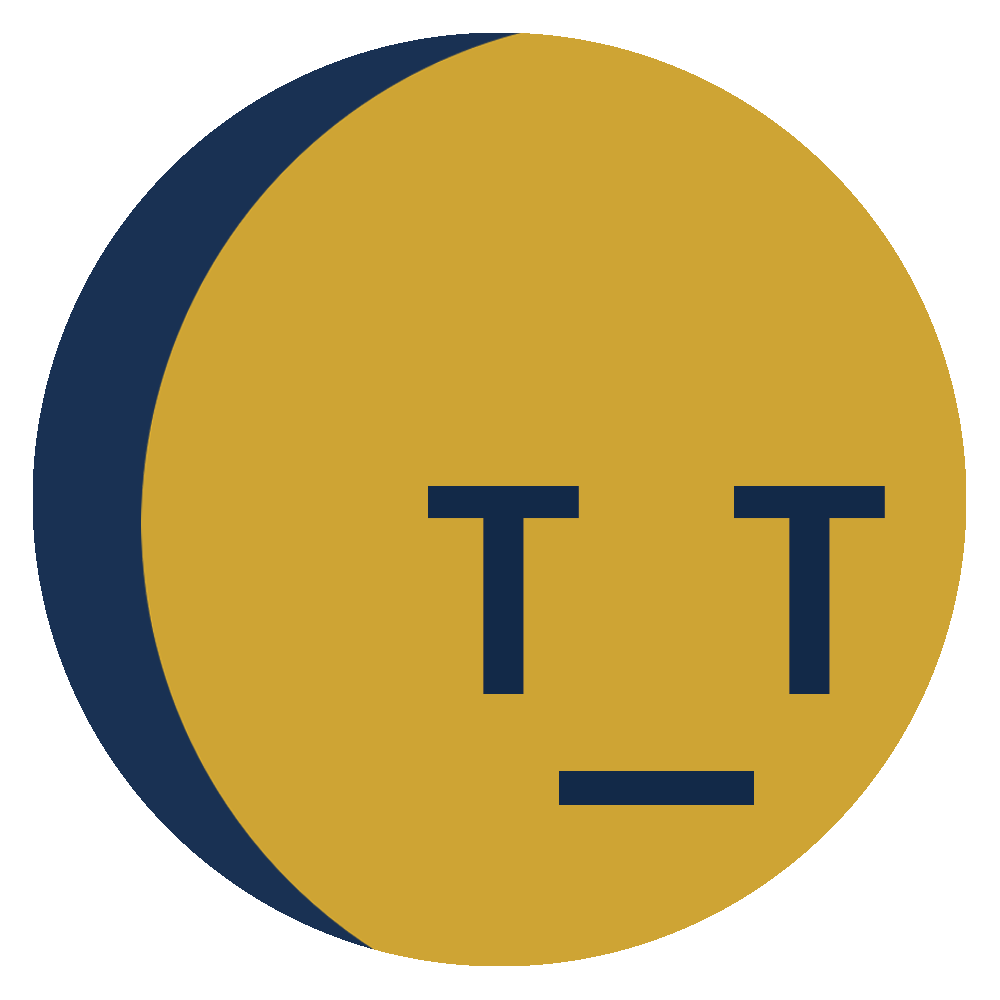
<style>
.page{position:relative;width:1000px;height:1000px;background:#cea434}
.page>*{position:absolute;margin:0}
.t1{font:311.7px "FranklinGothic-Medium";color:#122948}
</style>
<div class="page">
<p class="t1" style="left:428px;top:486px;width:457px;height:208px">T  T</p>
</div>
